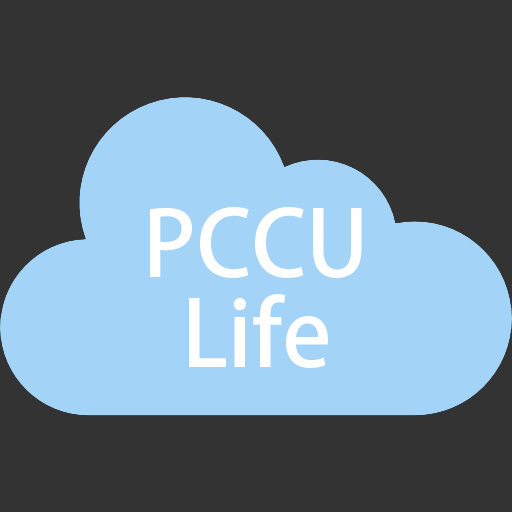
<style>
.page{position:relative;width:512px;height:512px;background:#333333}
.page>*{position:absolute;margin:0}
.t1{font:90px/90px "AdobeFanHeitiStd-Bold";color:#ffffff}
</style>
<div class="page">
<p class="t1" style="left:150px;top:207px;width:212px;height:161px;text-align:center">PCCU<br>Life</p>
</div>
